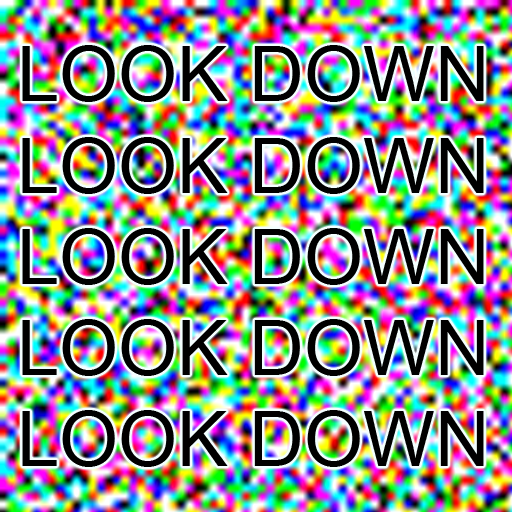
<style>
.page{position:relative;width:512px;height:512px}
.page>*{position:absolute;margin:0}
.t1{font:76px "ArialMT";color:#000000}
</style>
<div class="page">
<p class="t1" style="left:22px;top:45px;width:462px;height:422px">LOOK DOWN<br>LOOK DOWN<br>LOOK DOWN<br>LOOK DOWN<br>LOOK DOWN</p>
</div>
